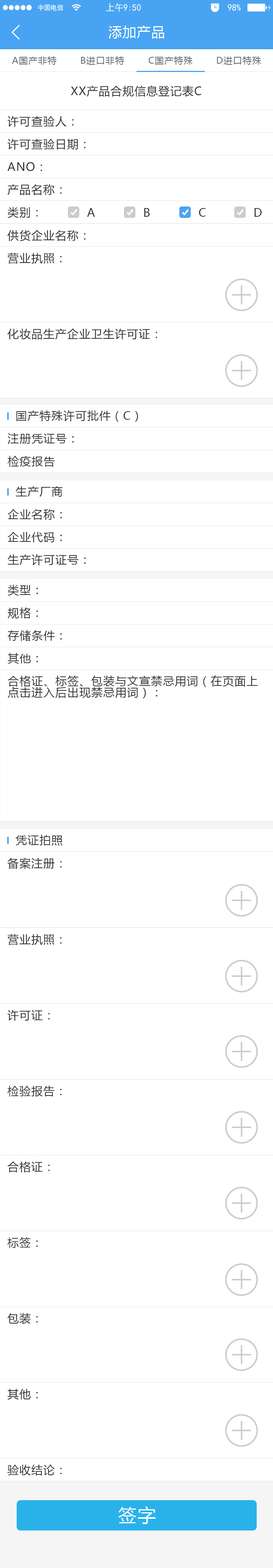
<style>
.page{position:relative;width:273px;height:1568px;background:#ffffff}
.page>*{position:absolute;margin:0}
.t1{font:13.6px "MicrosoftYaHei";letter-spacing:0.05em;color:#ffffff}
.t2{font:9.1px "MicrosoftYaHei";letter-spacing:0.05em;color:#666666}
.t3{font:11.4px "MicrosoftYaHei";letter-spacing:0.05em;color:#333333}
.t4{font:11.4px/11.4px "MicrosoftYaHei";letter-spacing:0.05em;color:#333333}
.t5{font:18.2px "MicrosoftYaHei";letter-spacing:0.05em;color:#ffffff}
</style>
<div class="page">
<p class="t1" style="left:108px;top:25px;width:56px;height:14px">添加产品</p>
<p class="t2" style="left:12px;top:56px;width:44px;height:9px">A国产非特</p>
<p class="t2" style="left:81px;top:56px;width:43px;height:9px">B进口非特</p>
<p class="t2" style="left:149px;top:56px;width:43px;height:9px">C国产特殊</p>
<p class="t2" style="left:217px;top:56px;width:44px;height:9px">D进口特殊</p>
<p class="t3" style="left:71px;top:85px;width:130px;height:12px">XX产品合规信息登记表C</p>
<p class="t3" style="left:8px;top:116px;width:66px;height:11px">许可查验人：</p>
<p class="t3" style="left:8px;top:139px;width:78px;height:11px">许可查验日期：</p>
<p class="t3" style="left:8px;top:162px;width:34px;height:9px">ANO：</p>
<p class="t3" style="left:8px;top:184px;width:54px;height:11px">产品名称：</p>
<p class="t3" style="left:8px;top:207px;width:30px;height:11px">类别：</p>
<p class="t3" style="left:87px;top:208px;width:8px;height:9px">A</p>
<p class="t3" style="left:144px;top:208px;width:6px;height:9px">B</p>
<p class="t3" style="left:199px;top:208px;width:6px;height:9px">C</p>
<p class="t3" style="left:254px;top:208px;width:7px;height:9px">D</p>
<p class="t3" style="left:7px;top:230px;width:79px;height:11px">供货企业名称：</p>
<p class="t3" style="left:8px;top:253px;width:54px;height:11px">营业执照：</p>
<p class="t3" style="left:8px;top:329px;width:149px;height:11px">化妆品生产企业卫生许可证：</p>
<p class="t3" style="left:16px;top:410px;width:122px;height:12px">国产特殊许可批件（C）</p>
<p class="t3" style="left:8px;top:433px;width:66px;height:11px">注册凭证号：</p>
<p class="t3" style="left:8px;top:456px;width:47px;height:11px">检疫报告</p>
<p class="t3" style="left:16px;top:486px;width:47px;height:11px">生产厂商</p>
<p class="t3" style="left:8px;top:509px;width:54px;height:11px">企业名称：</p>
<p class="t3" style="left:8px;top:532px;width:54px;height:10px">企业代码：</p>
<p class="t3" style="left:8px;top:554px;width:78px;height:11px">生产许可证号：</p>
<p class="t3" style="left:8px;top:585px;width:30px;height:11px">类型：</p>
<p class="t3" style="left:8px;top:607px;width:30px;height:12px">规格：</p>
<p class="t3" style="left:8px;top:630px;width:54px;height:11px">存储条件：</p>
<p class="t3" style="left:8px;top:653px;width:30px;height:11px">其他：</p>
<p class="t4" style="left:8px;top:675px;width:250px;height:23px">合格证、标签、包装与文宣禁忌用词（在页面上<br>点击进入后出现禁忌用词）：</p>
<p class="t3" style="left:16px;top:835px;width:47px;height:11px">凭证拍照</p>
<p class="t3" style="left:7px;top:858px;width:55px;height:11px">备案注册：</p>
<p class="t3" style="left:8px;top:934px;width:54px;height:11px">营业执照：</p>
<p class="t3" style="left:8px;top:1010px;width:42px;height:11px">许可证：</p>
<p class="t3" style="left:8px;top:1086px;width:54px;height:11px">检验报告：</p>
<p class="t3" style="left:8px;top:1161px;width:42px;height:11px">合格证：</p>
<p class="t3" style="left:7px;top:1237px;width:31px;height:11px">标签：</p>
<p class="t3" style="left:7px;top:1313px;width:31px;height:11px">包装：</p>
<p class="t3" style="left:8px;top:1389px;width:30px;height:11px">其他：</p>
<p class="t3" style="left:7px;top:1464px;width:55px;height:12px">验收结论：</p>
<p class="t5" style="left:118px;top:1506px;width:38px;height:18px">签字</p>
</div>
